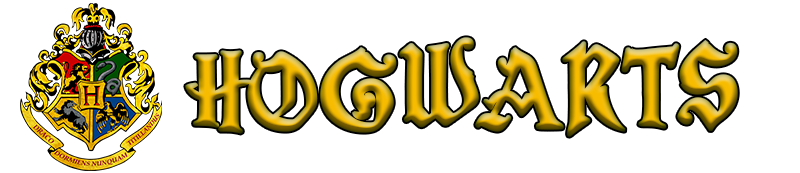
<style>
.page{position:relative;width:800px;height:173px;background:#ffffff}
.page>*{position:absolute;margin:0}
.t1{font:115px "MagicSchoolOne";text-transform:uppercase;font-weight:bold}
</style>
<div class="page">
<p class="t1" style="left:185px;top:37px;width:553px;height:100px">Hogwarts</p>
</div>
